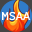
<style>
.page{position:relative;width:32px;height:32px}
.page>*{position:absolute;margin:0}
.t1{font:12px "PTMono-Regular";color:#ffffff}
</style>
<div class="page">
<p class="t1" style="left:2px;top:12px;width:29px;height:8px">MSAA</p>
</div>
